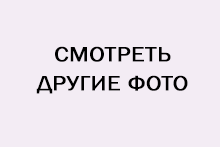
<style>
.page{position:relative;width:220px;height:147px;background:#f3ecf4}
.page>*{position:absolute;margin:0}
.t1{font:21.6px "FranklinGothic-Book";letter-spacing:0.005em;color:#000000;font-weight:bold;scale:1.11 1}
</style>
<div class="page">
<p class="t1" style="left:36px;top:46px;width:152px;height:48px;text-align:center">СМОТРЕТЬ <br>ДРУГИЕ ФОТО</p>
</div>
